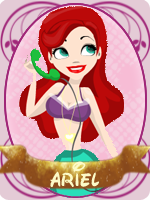
<style>
.page{position:relative;width:150px;height:200px}
.page>*{position:absolute;margin:0}
.t1{font:37.4px "Waltograph";color:#fcfac7}
</style>
<div class="page">
<p class="t1" style="left:50px;top:161px;width:49px;height:26px">ariel</p>
</div>
